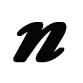
<style>
.page{position:relative;width:83px;height:83px;background:#ffffff}
.page>*{position:absolute;margin:0}
.t1{font:95px "AGaramondPro-BoldItalic";color:#050505;font-weight:bold;font-style:italic}
</style>
<div class="page">
<p class="t1" style="left:13px;top:22px;width:54px;height:41px">n</p>
</div>
